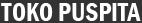
<style>
.page{position:relative;width:142px;height:23px;background:#333333}
.page>*{position:absolute;margin:0}
.t1{font:25.8px "FranklinGothic-DemiCond";color:#ffffff}
</style>
<div class="page">
<p class="t1" style="left:1px;top:3px;width:140px;height:18px">TOKO PUSPITA</p>
</div>
